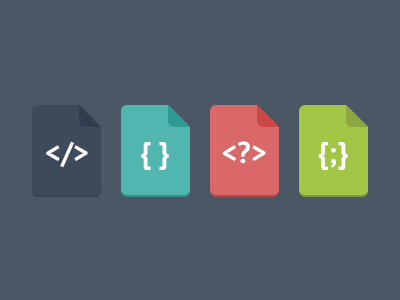
<style>
.page{position:relative;width:400px;height:300px;background:#4c5765}
.page>*{position:absolute;margin:0}
.t1{font:30px "PTSans-Bold";color:#ffffff;text-transform:uppercase}
</style>
<div class="page">
<p class="t1" style="left:46px;top:141px;width:42px;height:27px">&lt;/&gt;</p>
<p class="t1" style="left:141px;top:142px;width:28px;height:28px">{ }</p>
<p class="t1" style="left:222px;top:141px;width:44px;height:23px">&lt;?&gt;</p>
<p class="t1" style="left:318px;top:142px;width:30px;height:28px">{;}</p>
</div>
